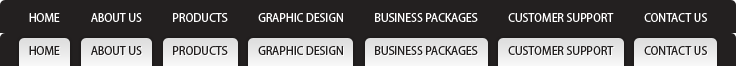
<style>
.page{position:relative;width:736px;height:66px;background:#232020}
.page>*{position:absolute;margin:0}
.t1{font:13px "MyriadPro-SemiCn";color:#ffffff;text-transform:uppercase}
.t2{font:13px "MyriadPro-SemiCn";color:#232020;text-transform:uppercase}
</style>
<div class="page">
<p class="t1" style="left:29px;top:13px;width:678px;height:9px">Home            About Us            Products            Graphic Design            Business Packages            Customer Support            Contact Us</p>
<p class="t2" style="left:29px;top:46px;width:678px;height:9px">Home            About Us            Products            Graphic Design            Business Packages            Customer Support            Contact Us</p>
</div>
